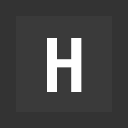
<style>
.page{position:relative;width:128px;height:128px;background:#3a3a3a}
.page>*{position:absolute;margin:0}
.t1{font:72px "Helvetica-Condensed-Bold";letter-spacing:-0.01em;color:#ffffff}
</style>
<div class="page">
<p class="t1" style="left:47px;top:38px;width:35px;height:54px">H</p>
</div>
